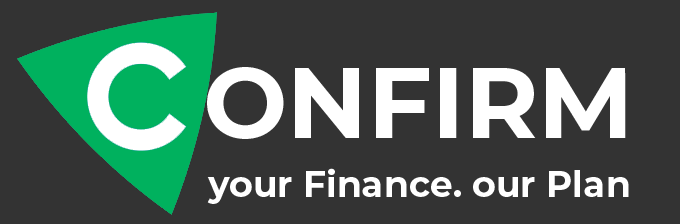
<style>
.page{position:relative;width:680px;height:224px;background:#333333}
.page>*{position:absolute;margin:0}
.t1{font:100px "Montserrat-Bold";color:#ffffff}
.t2{font:36px "Montserrat-Bold";color:#ffffff}
</style>
<div class="page">
<p class="t1" style="left:207px;top:67px;width:419px;height:72px">ONFIRM</p>
<p class="t2" style="left:207px;top:168px;width:422px;height:36px">your Finance. our Plan</p>
</div>
